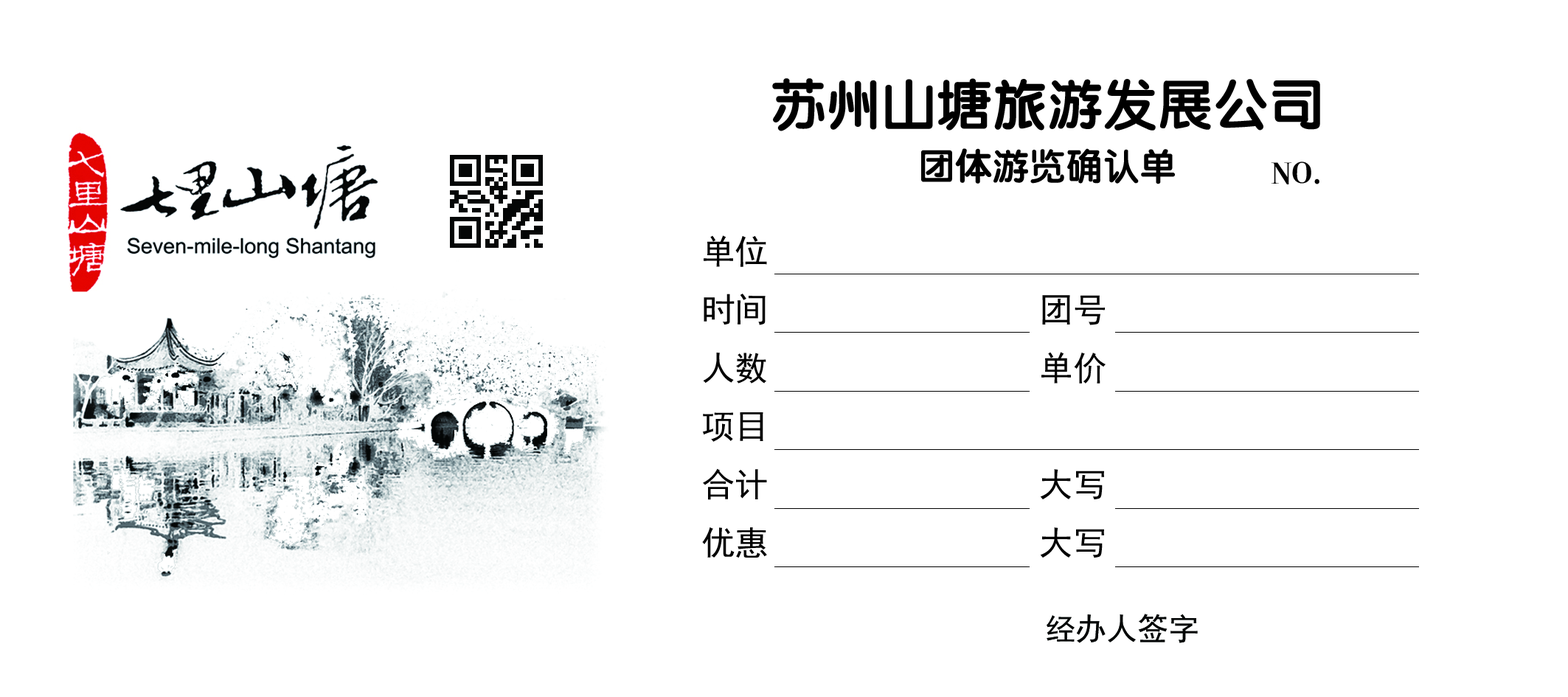
<style>
.page{position:relative;width:1568px;height:697px;background:#ffffff}
.page>*{position:absolute;margin:0}
.t1{font:55.3px/55.3px "FZY4JW--GB1-0";color:#000000}
.t2{font:36.9px/55.3px "FZY4JW--GB1-0";color:#000000}
.t3{font:30.7px "ç»å¸ç²å®ç®-regular";color:#000000}
.t4{font:33.8px/58.4px "SimHei";color:#000000}
.t5{font:30.7px "SimHei";color:#040606}
</style>
<div class="page">
<p class="t1" style="left:772px;top:78px;width:548px;height:106px;text-align:center">苏州山塘旅游发展公司<br><span class="t2">团体游览确认单</span></p>
<p class="t3" style="left:1271px;top:162px;width:48px;height:22px">NO.</p>
<p class="t4" style="left:702px;top:235px;width:404px;height:323px">单位                  <br>时间                团号              <br>人数                单价  <br>项目     <br>合计                大写<br>优惠                大写</p>
<p class="t5" style="left:1047px;top:614px;width:151px;height:29px">经办人签字</p>
</div>
